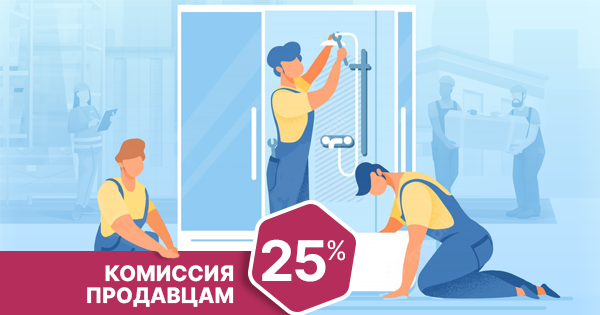
<style>
.page{position:relative;width:600px;height:315px}
.page>*{position:absolute;margin:0}
.t1{font:56px "Inter-Bold";letter-spacing:-0.05em;color:#ffffff;text-transform:uppercase}
.t2{font:26.7px "Inter-Regular";letter-spacing:-0.05em;color:#ffffff;text-transform:uppercase}
.t3{font:21.3px/22.7px "Inter-ExtraBold";letter-spacing:-0.01em;color:#ffffff;text-transform:uppercase}
</style>
<div class="page">
<p class="t1" style="left:262px;top:239px;width:64px;height:43px">25</p>
<p class="t2" style="left:327px;top:240px;width:18px;height:21px">%</p>
<p class="t3" style="left:87px;top:265px;width:147px;height:42px;text-align:right">комиссия<br>продавцам</p>
</div>
